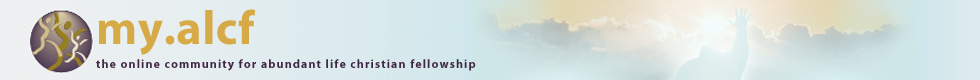
<style>
.page{position:relative;width:980px;height:80px}
.page>*{position:absolute;margin:0}
.t1{font:12px/24px "MyriadPro-Bold";letter-spacing:0.09em;color:#402844}
.t2{font:48px/24px "MyriadPro-Bold";letter-spacing:0.01em;color:#d6ab47}
</style>
<div class="page">
<p class="t1" style="left:96px;top:9px;width:380px;height:62px"><span class="t2">my.alcf<br></span>the online community for abundant life christian fellowship</p>
</div>
